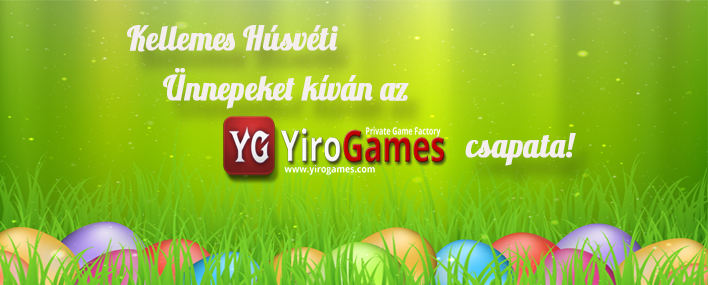
<style>
.page{position:relative;width:708px;height:285px}
.page>*{position:absolute;margin:0}
.t1{font:33.6px "Lobster1.3";color:#f5eeee;font-weight:bold;scale:0.92 1}
</style>
<div class="page">
<p class="t1" style="left:127px;top:25px;width:449px;height:141px">Kellemes Húsvéti<br> Ünnepeket kíván az<br>           csapata!</p>
</div>
